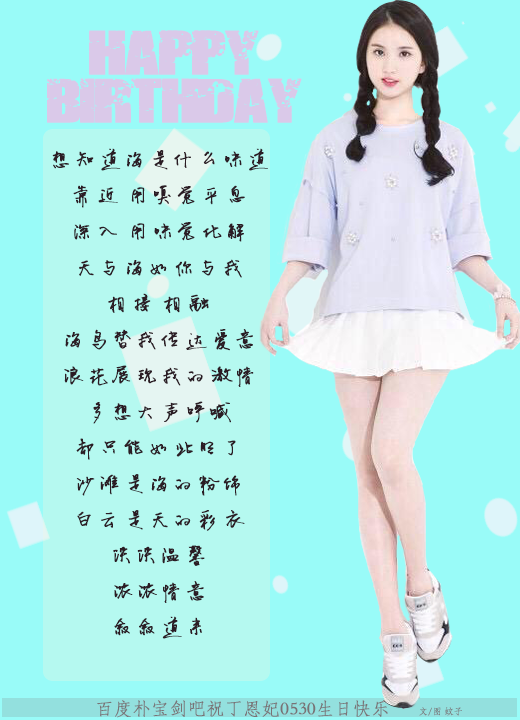
<style>
.page{position:relative;width:520px;height:720px;background:#99fbf8}
.page>*{position:absolute;margin:0}
.t1{font:48px/48px "DESTRUCCION";color:#e9bbe5;font-weight:bold}
.t2{font:24px/36px "momo_xinjian";color:#2b1c24;font-weight:bold}
.t3{font:18px "STFangsong";color:#797376;text-transform:uppercase;font-weight:bold}
.t4{font:9px "STFangsong";color:#797376;text-transform:uppercase;font-weight:bold}
</style>
<div class="page">
<p class="t1" style="left:47px;top:30px;width:255px;height:93px;text-align:center;opacity:0.8">HAPPY birthday</p>
<p class="t2" style="left:52px;top:148px;width:216px;height:491px;text-align:center">想知道海是什么味道<br>靠近 用嗅觉平息<br>深入 用味觉化解<br>天与海如你与我<br>相接 相融<br>海鸟替我传达爱意<br>浪花展现我的激情<br>多想大声呼喊<br>却只能如此明了<br>沙滩是海的粉饰<br>白云是天的彩衣<br>淡淡温馨<br>浓浓情意<br>叙叙道来</p>
<p class="t3" style="left:97px;top:700px;width:365px;height:18px">百度朴宝剑吧祝丁恩妃0530生日快乐        <span class="t4">文/图 蚊子</span></p>
</div>
